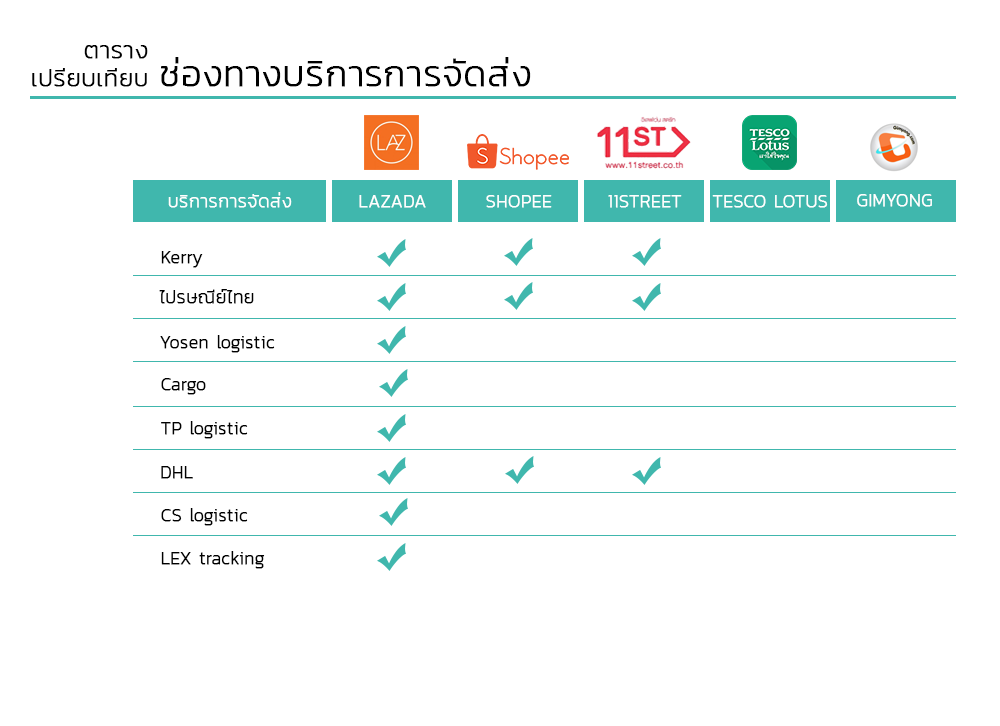
<style>
.page{position:relative;width:1000px;height:726px;background:#ffffff}
.page>*{position:absolute;margin:0}
.t1{font:36px/28px "Kanit-ExtraLight";color:#000000;font-weight:bold}
.t2{font:24px/28px "Kanit-ExtraLight";color:#000000;font-weight:bold}
.t3{font:18px "Kanit-ExtraLight";color:#ffffff;font-weight:bold}
.t4{font:18px "Kanit-ExtraLight";color:#000000;font-weight:bold}
</style>
<div class="page">
<p class="t1" style="left:32px;top:45px;width:499px;height:42px"><span class="t2">     ตาราง<br>เปรียบเทียบ </span>ช่องทางบริการการจัดส่ง</p>
<p class="t3" style="left:168px;top:192px;width:124px;height:16px">บริการการจัดส่ง</p>
<p class="t3" style="left:359px;top:195px;width:67px;height:13px">LAZADA</p>
<p class="t3" style="left:486px;top:195px;width:66px;height:13px">SHOPEE</p>
<p class="t3" style="left:608px;top:195px;width:74px;height:13px">11STREET</p>
<p class="t3" style="left:712px;top:195px;width:116px;height:13px">TESCO LOTUS</p>
<p class="t3" style="left:857px;top:194px;width:75px;height:13px">GIMYONG</p>
<p class="t4" style="left:161px;top:251px;width:42px;height:17px">Kerry</p>
<p class="t4" style="left:159px;top:289px;width:95px;height:15px">ไปรษณีย์ไทย</p>
<p class="t4" style="left:160px;top:335px;width:115px;height:18px">Yosen logistic</p>
<p class="t4" style="left:161px;top:378px;width:45px;height:17px">Cargo</p>
<p class="t4" style="left:161px;top:421px;width:87px;height:18px">TP logistic</p>
<p class="t4" style="left:161px;top:466px;width:32px;height:13px">DHL</p>
<p class="t4" style="left:161px;top:508px;width:87px;height:18px">CS logistic</p>
<p class="t4" style="left:161px;top:551px;width:104px;height:18px">LEX tracking</p>
</div>
